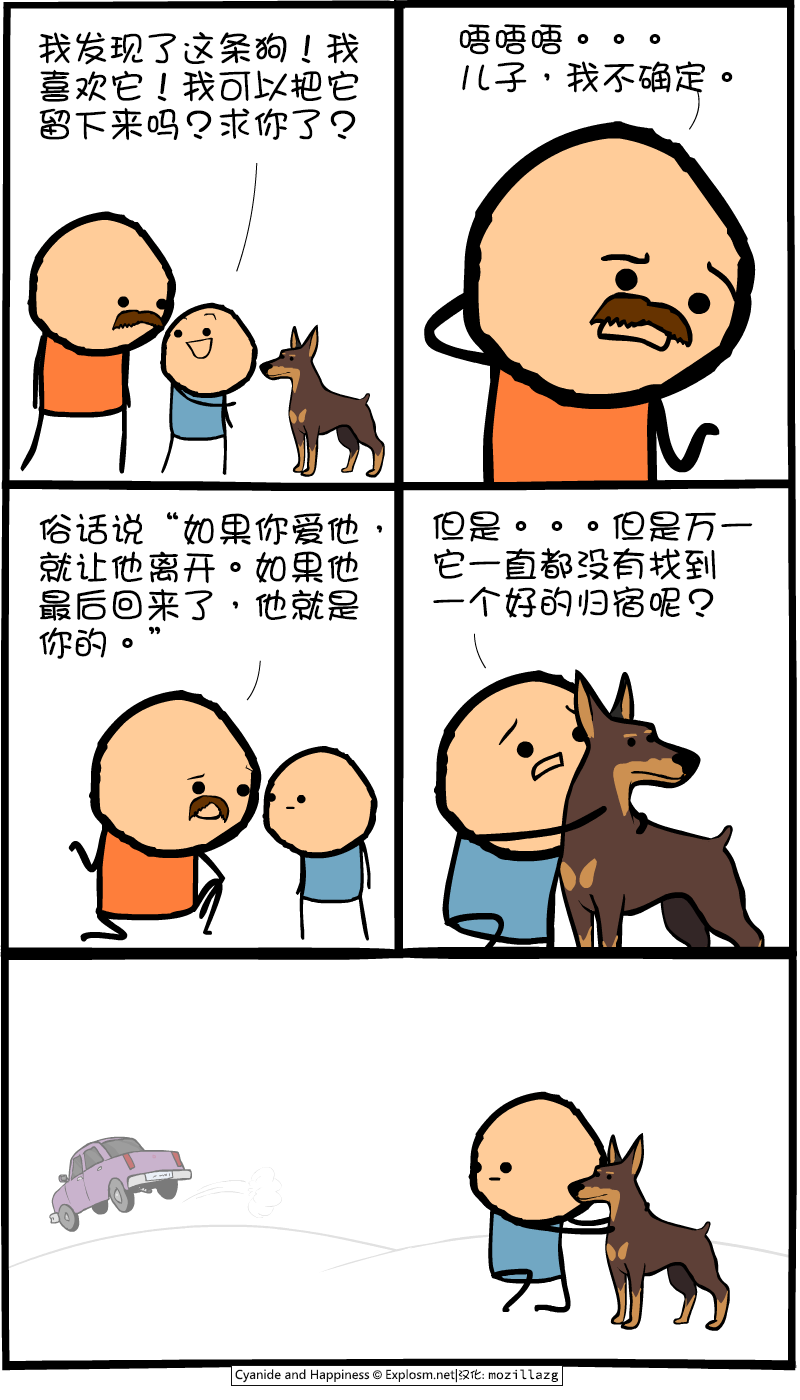
<style>
.page{position:relative;width:800px;height:1400px;background:#ffffff}
.page>*{position:absolute;margin:0}
.t1{font:36px/38px "DFGirl";color:#000000}
</style>
<div class="page">
<p class="t1" style="left:459px;top:24px;width:274px;height:69px">唔唔唔。。。<br>儿子，我不确定。</p>
<p class="t1" style="left:38px;top:31px;width:321px;height:110px">我发现了这条狗！我<br>喜欢它！我可以把它<br>留下来吗？求你了？</p>
<p class="t1" style="left:39px;top:512px;width:344px;height:147px">俗话说“如果你爱他，<br>就让他离开。如果他<br>最后回来了，他就是<br>你的。”</p>
<p class="t1" style="left:433px;top:511px;width:320px;height:107px">但是。。。但是万一<br>它一直都没有找到<br>一个好的归宿呢？</p>
</div>
